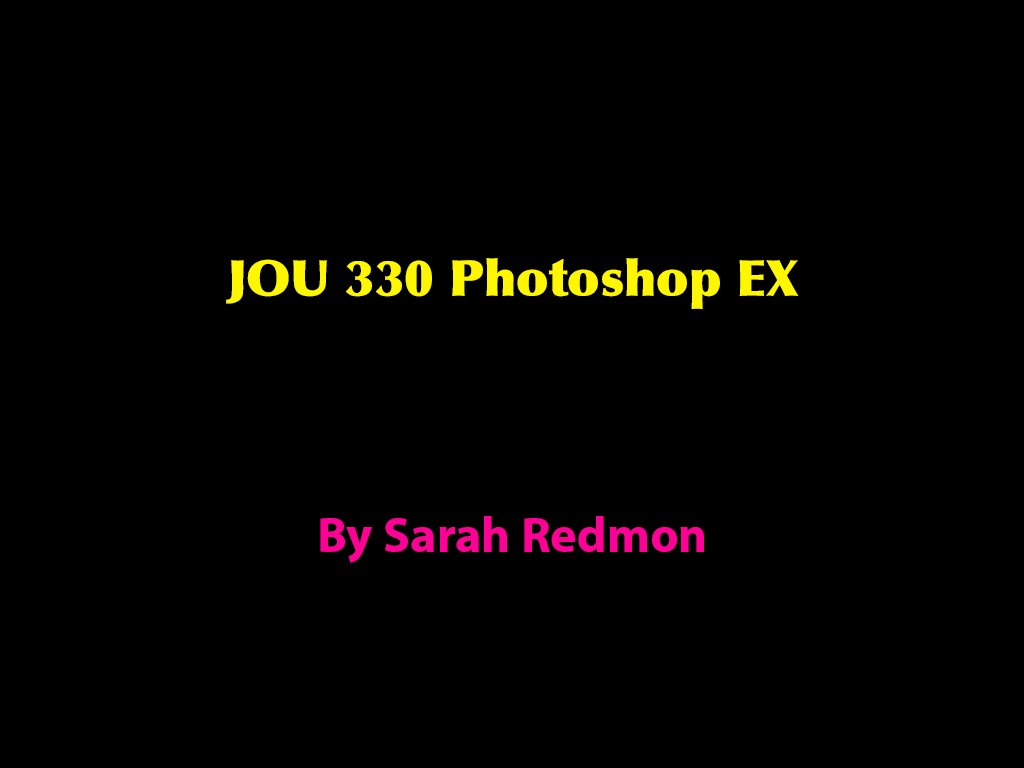
<style>
.page{position:relative;width:1024px;height:768px;background:#000000}
.page>*{position:absolute;margin:0}
.t1{font:50px "Optima-ExtraBlack";color:#fff700}
.t2{font:50px "MyriadPro-Bold";color:#ff0096}
</style>
<div class="page">
<p class="t1" style="left:226px;top:258px;width:573px;height:51px">JOU 330 Photoshop EX</p>
<p class="t2" style="left:320px;top:516px;width:384px;height:47px">By Sarah Redmon</p>
</div>
